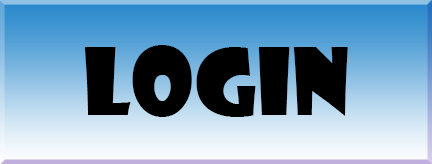
<style>
.page{position:relative;width:432px;height:164px}
.page>*{position:absolute;margin:0}
.t1{font:90px "ShowcardGothic-Reg";letter-spacing:0.01em;color:#000000}
</style>
<div class="page">
<p class="t1" style="left:84px;top:45px;width:264px;height:72px">login</p>
</div>
